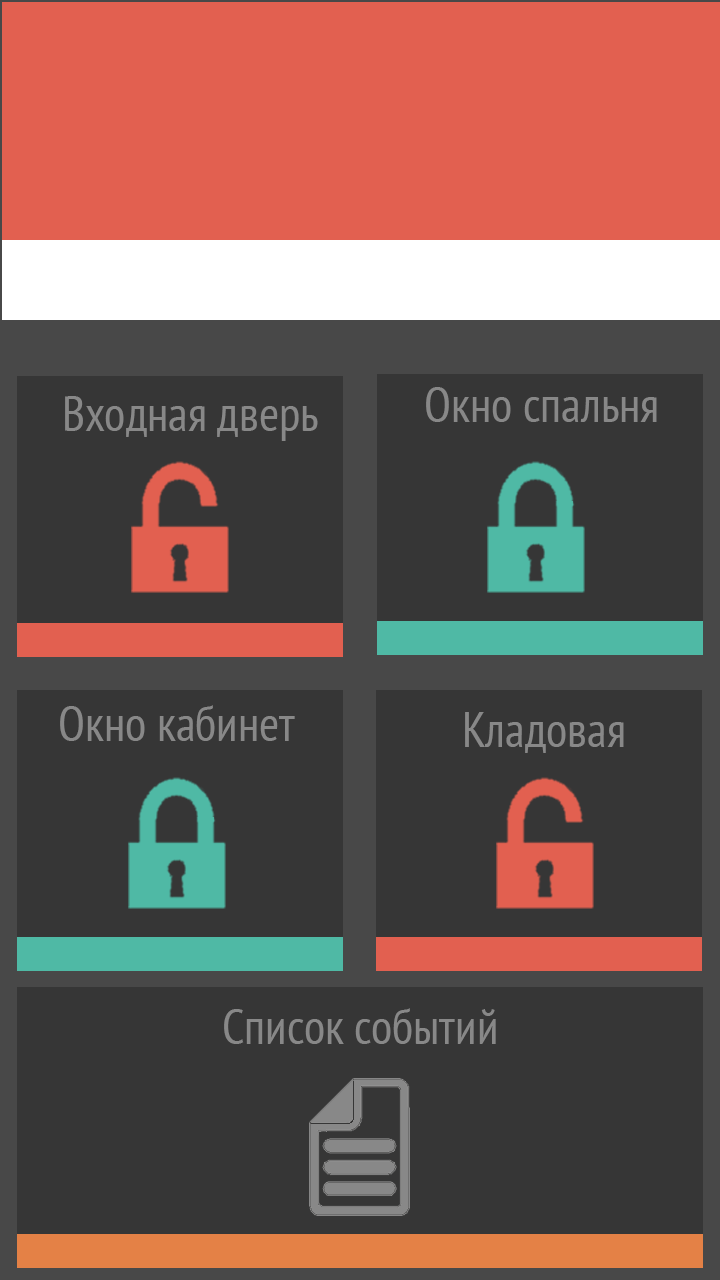
<style>
.page{position:relative;width:720px;height:1280px;background:#363636}
.page>*{position:absolute;margin:0}
.t1{font:49px "PTSans-Narrow";color:#888888}
</style>
<div class="page">
<p class="t1" style="left:426px;top:387px;width:231px;height:35px">Окно спальня</p>
<p class="t1" style="left:65px;top:396px;width:253px;height:45px">Входная дверь</p>
<p class="t1" style="left:60px;top:705px;width:235px;height:36px">Окно кабинет</p>
<p class="t1" style="left:465px;top:712px;width:159px;height:41px">Кладовая</p>
<p class="t1" style="left:224px;top:1008px;width:272px;height:36px">Список событий</p>
</div>
